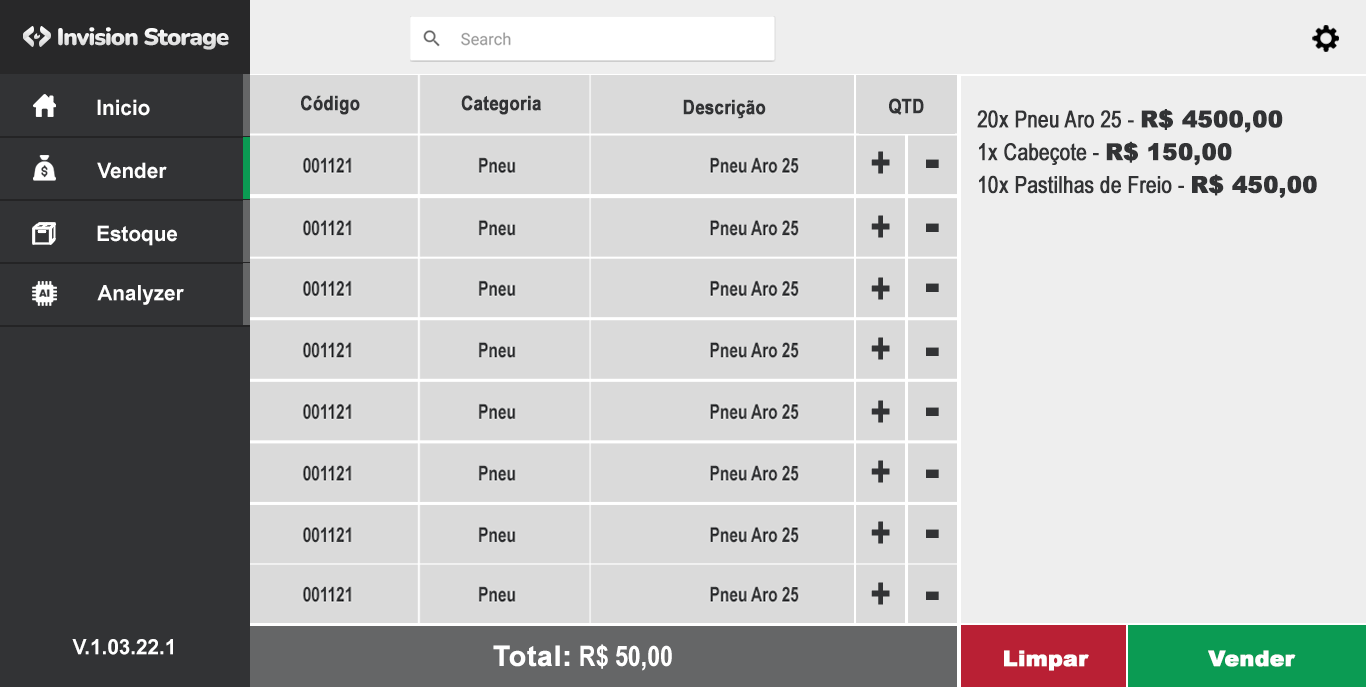
<style>
.page{position:relative;width:1366px;height:687px;background:#dadada}
.page>*{position:absolute;margin:0}
.t1{font:23.8px "Nunito-Black";letter-spacing:-0.04em;color:#ebebeb}
.t2{font:21.2px "ArialNarrow-Bold";color:#ffffff;scale:1.19 1}
.t3{font:20px "ArialNarrow-Bold";color:#323335;font-weight:bold}
.t4{font:23.4px/32.7px "ArialNarrow";color:#323335;font-weight:bold;scale:0.96 1}
.t5{font:23.4px/32.7px "Arial-Black";color:#323335;font-weight:bold;scale:0.96 1}
.t6{font:58.7px "ArialNarrow-Bold";color:#323335;font-weight:bold}
.t7{font:28.3px "ArialNarrow-Bold";color:#ffffff}
.t8{font:28.3px "Arial-BoldMT";color:#ffffff;font-weight:bold}
.t9{font:21.7px "Arial-Black";color:#ffffff;font-weight:bold}
</style>
<div class="page">
<p class="t1" style="left:58px;top:27px;width:171px;height:23px">Invision Storage</p>
<p class="t2" style="left:97px;top:99px;width:53px;height:17px">Inicio</p>
<p class="t3" style="left:301px;top:95px;width:59px;height:20px">Código</p>
<p class="t3" style="left:461px;top:95px;width:80px;height:20px">Categoria</p>
<p class="t3" style="left:683px;top:99px;width:83px;height:20px">Descrição</p>
<p class="t3" style="left:889px;top:98px;width:35px;height:17px">QTD</p>
<p class="t4" style="left:977px;top:109px;width:340px;height:89px">20x Pneu Aro 25 - <span class="t5">R$ 4500,00<br></span>1x Cabeçote - <span class="t5">R$ 150,00<br></span>10x Pastilhas de Freio - <span class="t5">R$ 450,00</span></p>
<p class="t6" style="left:926px;top:159px;width:13px;height:9px">-</p>
<p class="t2" style="left:97px;top:162px;width:70px;height:17px">Vender</p>
<p class="t2" style="left:97px;top:225px;width:80px;height:21px">Estoque</p>
<p class="t6" style="left:926px;top:223px;width:13px;height:9px">-</p>
<p class="t2" style="left:97px;top:285px;width:87px;height:20px">Analyzer</p>
<p class="t6" style="left:926px;top:283px;width:13px;height:9px">-</p>
<p class="t6" style="left:926px;top:347px;width:13px;height:9px">-</p>
<p class="t6" style="left:926px;top:407px;width:13px;height:9px">-</p>
<p class="t6" style="left:926px;top:469px;width:13px;height:9px">-</p>
<p class="t6" style="left:926px;top:529px;width:13px;height:9px">-</p>
<p class="t6" style="left:926px;top:591px;width:13px;height:9px">-</p>
<p class="t2" style="left:72px;top:639px;width:101px;height:16px">V.1.03.22.1</p>
<p class="t7" style="left:493px;top:644px;width:179px;height:27px"><span class="t8">Total:</span> R$ 50,00</p>
<p class="t9" style="left:1004px;top:650px;width:85px;height:21px">Limpar</p>
<p class="t9" style="left:1208px;top:650px;width:88px;height:17px">Vender</p>
</div>
